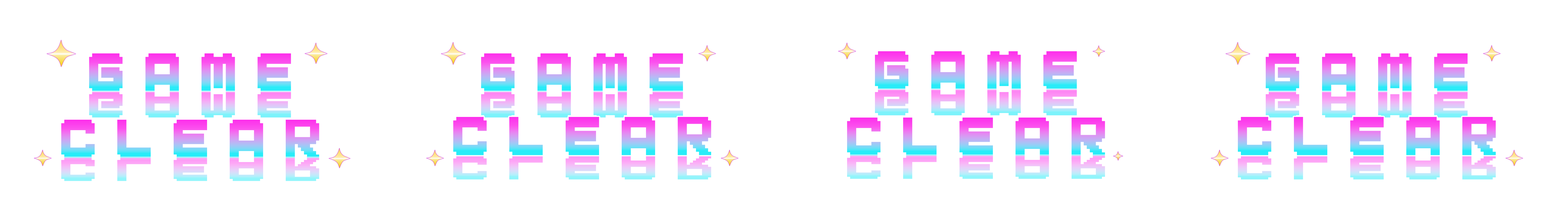
<style>
.page{position:relative;width:1568px;height:221px;background:#ffffff}
.page>*{position:absolute;margin:0}
.t1{font:41.5px "Melonano";letter-spacing:0.54em;scale:0.88 1}
.t2{font:28px "Melonano";letter-spacing:0.54em;scale:1.3 1}
.t3{font:25.2px "Melonano";letter-spacing:0.54em;scale:1.45 1}
</style>
<div class="page">
<p class="t1" style="left:89px;top:53px;width:202px;height:39px">GAME</p>
<p class="t1" style="left:481px;top:53px;width:202px;height:39px">GAME</p>
<p class="t1" style="left:875px;top:51px;width:202px;height:38px">GAME</p>
<p class="t1" style="left:1266px;top:53px;width:202px;height:39px">GAME</p>
<p class="t2" style="left:875px;top:89px;width:202px;height:26px">GAME</p>
<p class="t2" style="left:89px;top:92px;width:202px;height:25px">GAME</p>
<p class="t2" style="left:481px;top:92px;width:202px;height:25px">GAME</p>
<p class="t2" style="left:1266px;top:92px;width:202px;height:25px">GAME</p>
<p class="t1" style="left:61px;top:119px;width:258px;height:39px">CLEAR</p>
<p class="t1" style="left:453px;top:117px;width:258px;height:38px">CLEAR</p>
<p class="t1" style="left:847px;top:117px;width:258px;height:39px">CLEAR</p>
<p class="t1" style="left:1238px;top:117px;width:258px;height:38px">CLEAR</p>
<p class="t3" style="left:61px;top:157px;width:258px;height:24px">CLEAR</p>
<p class="t3" style="left:453px;top:156px;width:258px;height:23px">CLEAR</p>
<p class="t3" style="left:847px;top:155px;width:258px;height:24px">CLEAR</p>
<p class="t3" style="left:1238px;top:156px;width:258px;height:23px">CLEAR</p>
</div>
